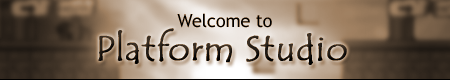
<style>
.page{position:relative;width:450px;height:80px}
.page>*{position:absolute;margin:0}
.t1{font:17.9px "TrebuchetMS";color:#000000}
.t2{font:35.9px "TempusSansITC";font-weight:bold}
</style>
<div class="page">
<p class="t1" style="left:177px;top:13px;width:95px;height:15px">Welcome to</p>
<p class="t2" style="left:98px;top:28px;width:249px;height:37px">Platform Studio</p>
</div>
